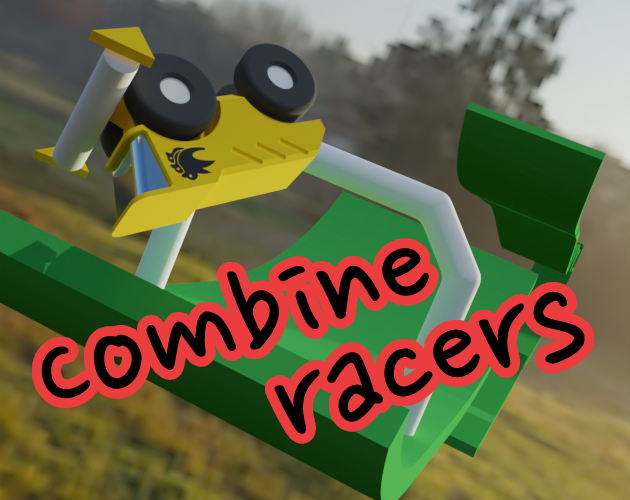
<style>
.page{position:relative;width:630px;height:500px}
.page>*{position:absolute;margin:0}
.t1{font:150px "NanumPen";color:#000000}
</style>
<div class="page">
<p class="t1" style="left:41px;top:248px;width:388px;height:151px;rotate:-17deg">Combine</p>
<p class="t1" style="left:274px;top:291px;width:311px;height:143px;rotate:-18deg">racers</p>
</div>
